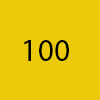
<style>
.page{position:relative;width:100px;height:100px;background:#ecca0a}
.page>*{position:absolute;margin:0}
.t1{font:32px "MyriadPro-Regular";color:#000000}
</style>
<div class="page">
<p class="t1" style="left:24px;top:40px;width:45px;height:21px">100</p>
</div>
